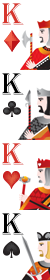
<style>
.page{position:relative;width:50px;height:280px;background:#ffffff}
.page>*{position:absolute;margin:0}
.t1{font:32px "Algerian";letter-spacing:0.04em;color:#d6362e;text-transform:uppercase}
.t2{font:32px "Algerian";letter-spacing:0.04em;color:#000000;text-transform:uppercase}
</style>
<div class="page">
<p class="t1" style="left:2px;top:3px;width:22px;height:22px">K</p>
<p class="t2" style="left:2px;top:73px;width:22px;height:22px">K</p>
<p class="t1" style="left:2px;top:143px;width:22px;height:22px">K</p>
<p class="t2" style="left:2px;top:213px;width:22px;height:22px">K</p>
</div>
